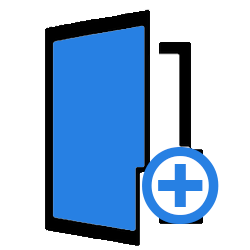
<style>
.page{position:relative;width:250px;height:250px;background:#ffffff}
.page>*{position:absolute;margin:0}
.t1{font:138.2px "CenturyGothic";color:#2780e3}
.t2{font:90.1px "CenturyGothic-Bold";color:#2780e3}
</style>
<div class="page">
<p class="t1" style="left:142px;top:147px;width:77px;height:77px">o</p>
<p class="t2" style="left:158px;top:164px;width:45px;height:43px">+</p>
</div>
